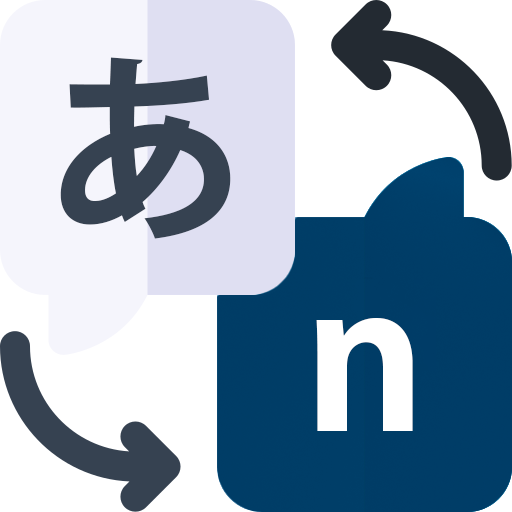
<style>
.page{position:relative;width:512px;height:512px;background:#ffffff}
.page>*{position:absolute;margin:0}
.t1{font:200px "KozGoPr6N-Bold";color:#364251}
.t2{font:200px "KozGoPr6N-Bold";color:#ffffff}
</style>
<div class="page">
<p class="t1" style="left:60px;top:57px;width:171px;height:182px">あ</p>
<p class="t2" style="left:316px;top:317px;width:97px;height:114px">n</p>
</div>
